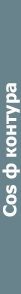
<style>
.page{position:relative;width:21px;height:294px;background:#68838b}
.page>*{position:absolute;margin:0}
.t1{font:18px "Tahoma-Bold";color:#fefefe}
</style>
<div class="page">
<p class="t1" style="left:2px;top:83px;width:18px;height:134px;rotate:-90deg">Cos ф контура</p>
</div>
